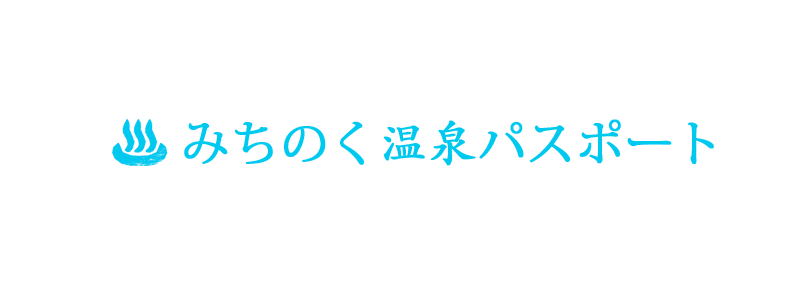
<style>
.page{position:relative;width:800px;height:300px;background:#ffffff}
.page>*{position:absolute;margin:0}
.t1{font:48px "AdobeKaitiStd-Regular";color:#00c9f0;font-weight:bold}
</style>
<div class="page">
<p class="t1" style="left:184px;top:119px;width:530px;height:47px">みちのく温泉パスポート</p>
</div>
